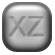
<style>
.page{position:relative;width:55px;height:55px;background:#ffffff}
.page>*{position:absolute;margin:0}
.t1{font:28px "ArialMT";color:#959595}
</style>
<div class="page">
<p class="t1" style="left:9px;top:17px;width:35px;height:20px">XZ</p>
</div>
